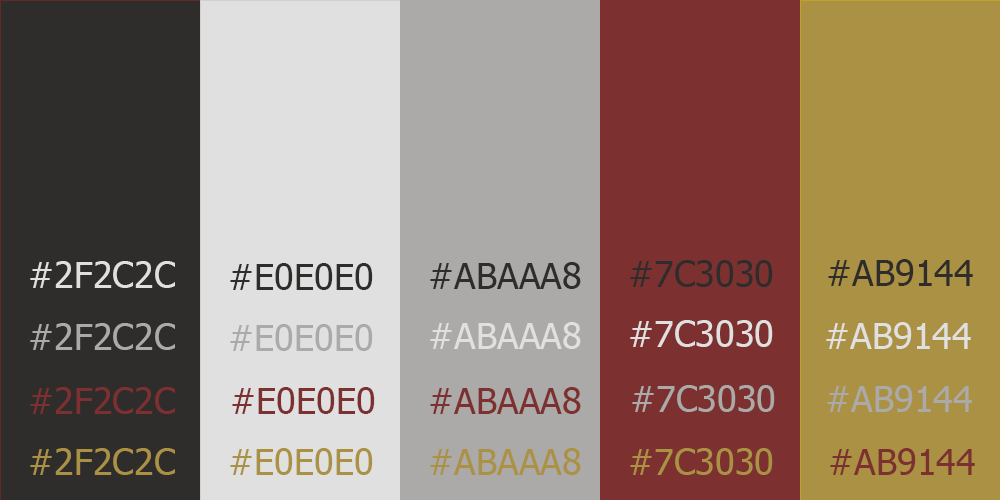
<style>
.page{position:relative;width:1000px;height:500px;background:#e0e0e0}
.page>*{position:absolute;margin:0}
.t1{font:36px "Tahoma";color:#e0e0e0}
.t2{font:36px "Tahoma";color:#2f2c2c}
.t3{font:36px "Tahoma";color:#abaaa8}
.t4{font:36px "Tahoma";color:#7c3030}
.t5{font:36px "Tahoma";color:#ab9144}
</style>
<div class="page">
<p class="t1" style="left:30px;top:261px;width:145px;height:27px">#2F2C2C</p>
<p class="t2" style="left:230px;top:263px;width:143px;height:27px">#E0E0E0</p>
<p class="t2" style="left:430px;top:262px;width:151px;height:27px">#ABAAA8</p>
<p class="t2" style="left:630px;top:260px;width:143px;height:27px">#7C3030</p>
<p class="t2" style="left:828px;top:259px;width:145px;height:27px">#AB9144</p>
<p class="t3" style="left:30px;top:323px;width:145px;height:27px">#2F2C2C</p>
<p class="t3" style="left:230px;top:324px;width:143px;height:27px">#E0E0E0</p>
<p class="t1" style="left:430px;top:322px;width:151px;height:27px">#ABAAA8</p>
<p class="t1" style="left:630px;top:320px;width:143px;height:27px">#7C3030</p>
<p class="t1" style="left:826px;top:322px;width:145px;height:27px">#AB9144</p>
<p class="t4" style="left:30px;top:387px;width:145px;height:27px">#2F2C2C</p>
<p class="t4" style="left:232px;top:387px;width:143px;height:27px">#E0E0E0</p>
<p class="t4" style="left:430px;top:387px;width:151px;height:27px">#ABAAA8</p>
<p class="t3" style="left:632px;top:385px;width:143px;height:27px">#7C3030</p>
<p class="t3" style="left:827px;top:385px;width:145px;height:27px">#AB9144</p>
<p class="t5" style="left:30px;top:448px;width:145px;height:27px">#2F2C2C</p>
<p class="t5" style="left:230px;top:448px;width:143px;height:27px">#E0E0E0</p>
<p class="t5" style="left:430px;top:448px;width:151px;height:27px">#ABAAA8</p>
<p class="t5" style="left:630px;top:448px;width:143px;height:27px">#7C3030</p>
<p class="t4" style="left:830px;top:448px;width:145px;height:27px">#AB9144</p>
</div>
